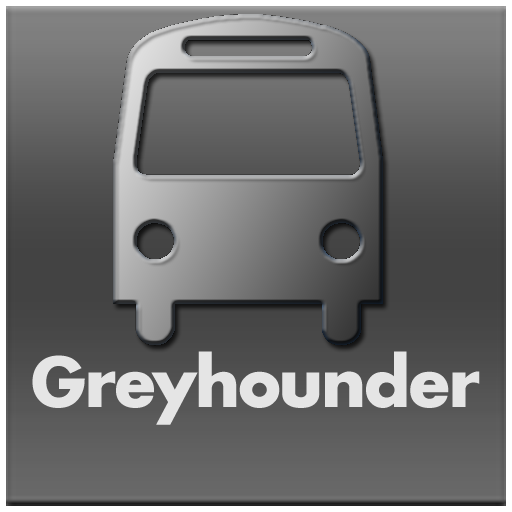
<style>
.page{position:relative;width:512px;height:512px}
.page>*{position:absolute;margin:0}
.t1{font:72px "IntrepidBold";letter-spacing:-0.02em;color:#e5e5e5}
</style>
<div class="page">
<p class="t1" style="left:32px;top:351px;width:448px;height:74px">Greyhounder</p>
</div>
